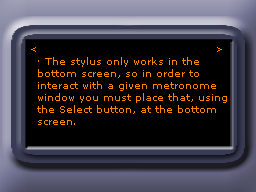
<style>
.page{position:relative;width:256px;height:192px;background:#000000}
.page>*{position:absolute;margin:0}
.t1{font:9px "MSReferenceSansSerif";color:#ff8400}
.t2{font:10px "MSReferenceSansSerif";color:#ff8400}
</style>
<div class="page">
<p class="t1" style="left:31px;top:47px;width:5px;height:5px">&lt;</p>
<p class="t1" style="left:217px;top:47px;width:5px;height:5px">&gt;</p>
<p class="t2" style="left:37px;top:57px;width:190px;height:68px">· The stylus only works in the <br>bottom screen, so in order to <br>interact with a given metronome <br>window you must place that, using <br>the Select button, at the bottom <br>screen.</p>
</div>
